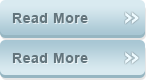
<style>
.page{position:relative;width:146px;height:80px}
.page>*{position:absolute;margin:0}
.t1{font:14px "Arial-BoldMT";letter-spacing:0.04em;color:#63757d}
.t2{font:24px "Tahoma-Bold";color:#edfaff}
</style>
<div class="page">
<p class="t1" style="left:12px;top:13px;width:76px;height:10px">Read More</p>
<p class="t2" style="left:125px;top:12px;width:14px;height:12px">»</p>
<p class="t1" style="left:12px;top:53px;width:76px;height:10px">Read More</p>
<p class="t2" style="left:125px;top:52px;width:14px;height:12px">»</p>
</div>
